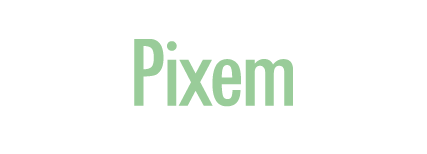
<style>
.page{position:relative;width:427px;height:154px;background:#ffffff}
.page>*{position:absolute;margin:0}
.t1{font:107px "TwCenMT-Condensed";letter-spacing:-0.04em;color:#99cc99}
</style>
<div class="page">
<p class="t1" style="left:134px;top:39px;width:159px;height:68px">Pixem</p>
</div>
